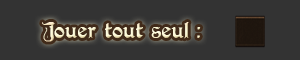
<style>
.page{position:relative;width:300px;height:60px;background:#333333}
.page>*{position:absolute;margin:0}
.t1{font:16px "PerryGothic";color:#fcf6d3}
</style>
<div class="page">
<p class="t1" style="left:42px;top:22px;width:159px;height:20px">Jouer tout seul :</p>
</div>
